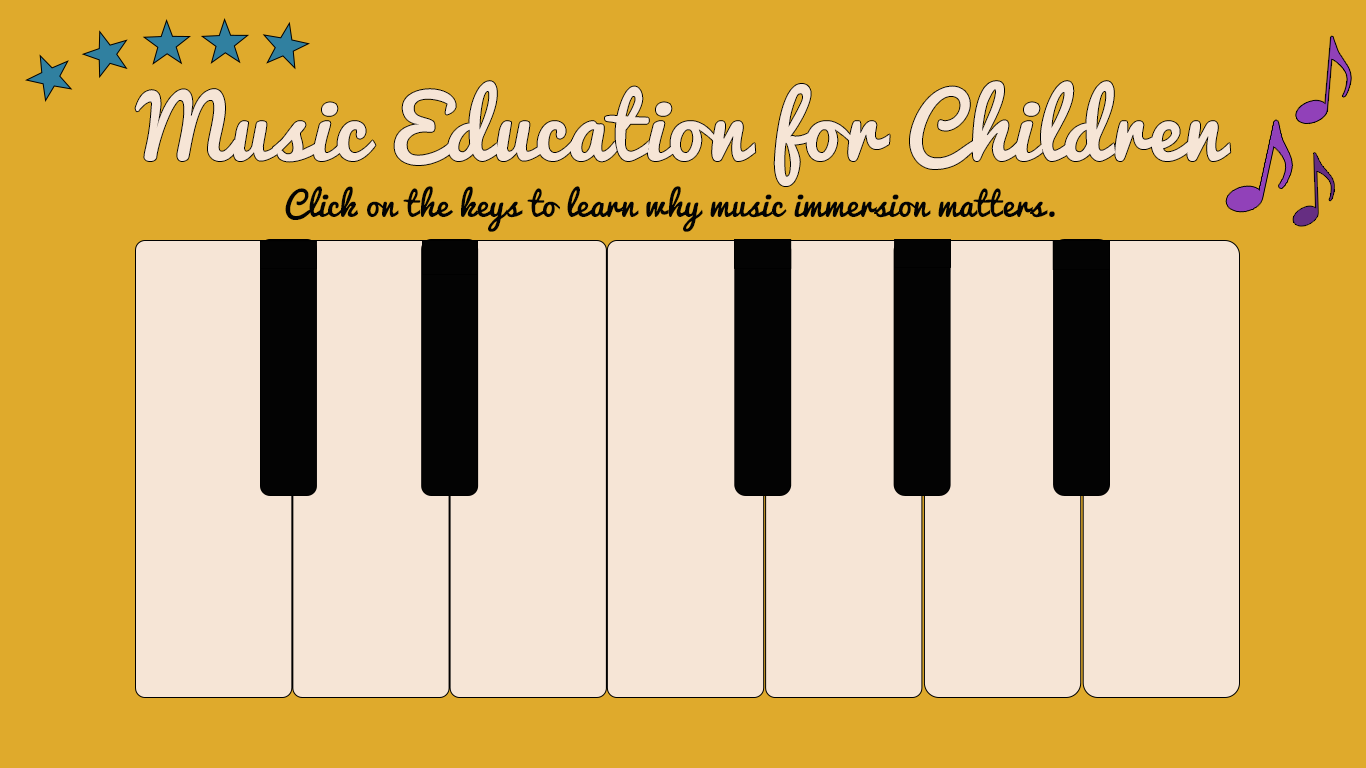
<style>
.page{position:relative;width:1366px;height:768px;background:#dfaa2c}
.page>*{position:absolute;margin:0}
.t1{font:85.1px "Pacifico-Regular";letter-spacing:0.025em;color:#f6e5d6}
.t2{font:32.6px "Pacifico-Regular";letter-spacing:0.025em;color:#030303}
</style>
<div class="page">
<p class="t1" style="left:135px;top:81px;width:1096px;height:105px">Music Education for Children</p>
<p class="t2" style="left:285px;top:186px;width:770px;height:46px">Click on the keys to learn why music immersion matters.</p>
</div>
